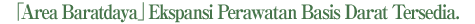
<style>
.page{position:relative;width:475px;height:24px;background:#ffffff}
.page>*{position:absolute;margin:0}
.t1{font:20px "RyuminPro-ExBold";letter-spacing:-0.08em;color:#46754a;scale:0.9 1}
.t2{font:20px "RyuminPro-ExBold";letter-spacing:-0.08em;color:#46754a;scale:0.87 1}
</style>
<div class="page">
<p class="t1" style="left:17px;top:2px;width:442px;height:21px"><span class="t2">「Area Baratdaya」</span>Ekspansi Perawatan Basis Darat Tersedia.</p>
</div>
